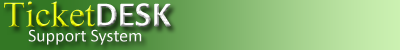
<style>
.page{position:relative;width:400px;height:50px}
.page>*{position:absolute;margin:0}
.t1{font:36px "TimesNewRomanPSMT";color:#eaf902}
.t2{font:36px "Calibri-Bold";color:#fdfdfd}
.t3{font:18px "Calibri";color:#fefefe}
</style>
<div class="page">
<p class="t1" style="left:4px;top:1px;width:167px;height:26px">Ticket<span class="t2">DESK</span></p>
<p class="t3" style="left:28px;top:29px;width:114px;height:16px">Support System</p>
</div>
